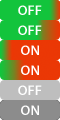
<style>
.page{position:relative;width:60px;height:120px}
.page>*{position:absolute;margin:0}
.t1{font:14px "MyriadPro-Semibold";color:#ffffff}
</style>
<div class="page">
<p class="t1" style="left:18px;top:5px;width:24px;height:10px">OFF</p>
<p class="t1" style="left:18px;top:25px;width:24px;height:10px">OFF</p>
<p class="t1" style="left:21px;top:45px;width:18px;height:10px">ON</p>
<p class="t1" style="left:21px;top:65px;width:18px;height:10px">ON</p>
<p class="t1" style="left:18px;top:85px;width:24px;height:10px">OFF</p>
<p class="t1" style="left:21px;top:105px;width:18px;height:10px">ON</p>
</div>
